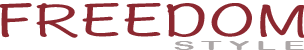
<style>
.page{position:relative;width:304px;height:50px;background:#ffffff}
.page>*{position:absolute;margin:0}
.t1{font:49.1px "HannotateSC-W5";color:#8c2830;scale:1.46 1}
.t2{font:13.3px "ArialRoundedMTBold";letter-spacing:0.2em;color:#aca7a7;scale:2.5 1}
</style>
<div class="page">
<p class="t1" style="left:0px;top:3px;width:305px;height:35px">FREEDOM</p>
<p class="t2" style="left:174px;top:41px;width:130px;height:9px">STYLE</p>
</div>
